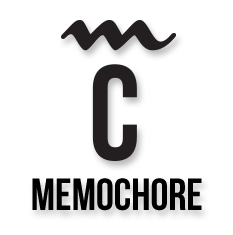
<style>
.page{position:relative;width:233px;height:235px;background:#ffffff}
.page>*{position:absolute;margin:0}
.t1{font:45px "BebasNeue";color:#000000}
</style>
<div class="page">
<p class="t1" style="left:32px;top:178px;width:170px;height:33px">memochore</p>
</div>
